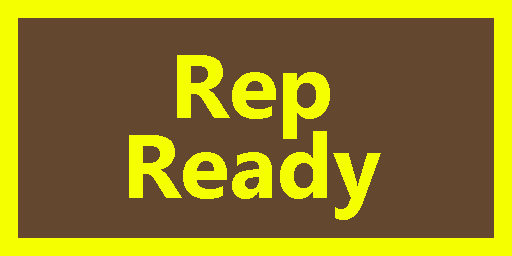
<style>
.page{position:relative;width:512px;height:256px;background:#64472f}
.page>*{position:absolute;margin:0}
.t1{font:90px/80px "Gadugi-Bold";color:#f6ff00}
</style>
<div class="page">
<p class="t1" style="left:129px;top:55px;width:252px;height:165px;text-align:center">Rep<br>Ready</p>
</div>
